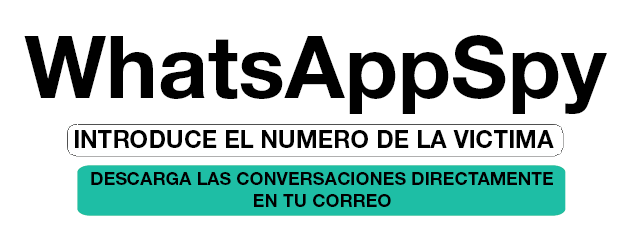
<style>
.page{position:relative;width:628px;height:242px;background:#ffffff}
.page>*{position:absolute;margin:0}
.t1{font:87px "HelveticaNeueLTStd-Bd";color:#000000}
.t2{font:24px "HelveticaNeueLTStd-Bd";color:#000000}
.t3{font:18px "HelveticaNeueLTStd-Bd";color:#000000}
</style>
<div class="page">
<p class="t1" style="left:24px;top:35px;width:583px;height:79px">WhatsAppSpy</p>
<p class="t2" style="left:75px;top:130px;width:479px;height:18px">INTRODUCE EL NUMERO DE LA VICTIMA</p>
<p class="t3" style="left:91px;top:172px;width:462px;height:35px;text-align:center">DESCARGA LAS CONVERSACIONES DIRECTAMENTE<br>EN TU CORREO</p>
</div>
